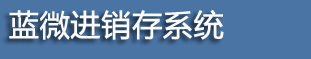
<style>
.page{position:relative;width:311px;height:59px;background:#4a74a4}
.page>*{position:absolute;margin:0}
.t1{font:30px "MicrosoftYaHei";color:#f8f9fa;font-weight:bold}
</style>
<div class="page">
<p class="t1" style="left:9px;top:10px;width:215px;height:30px">蓝微进销存系统</p>
</div>
